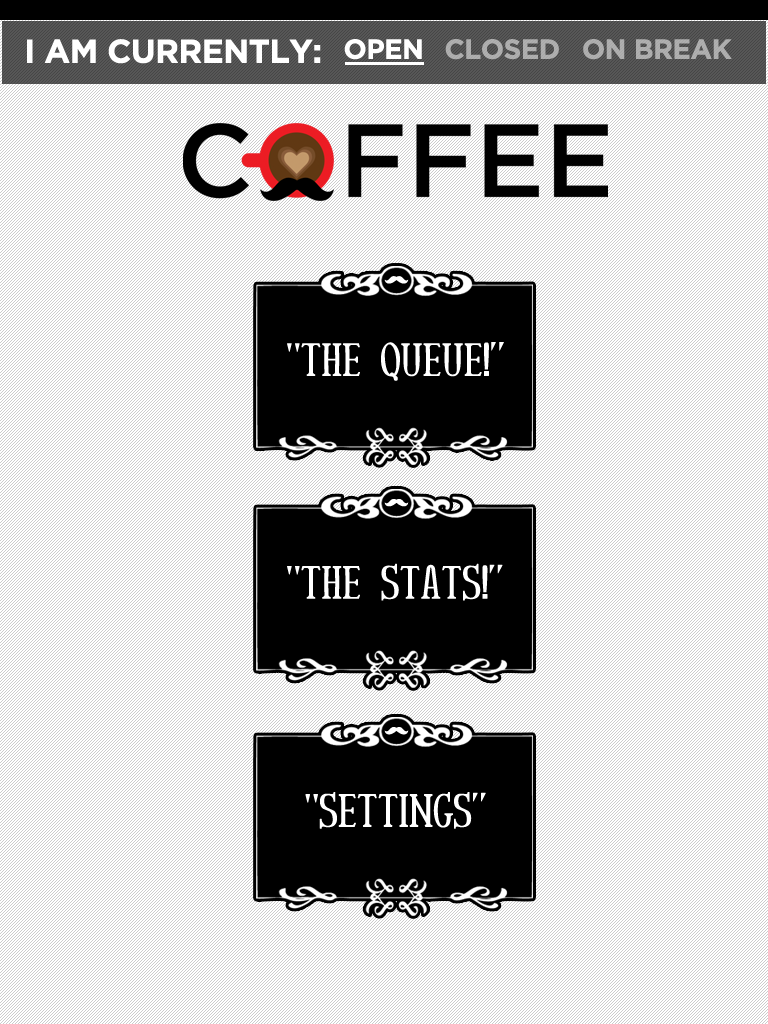
<style>
.page{position:relative;width:768px;height:1024px;background:#ffffff}
.page>*{position:absolute;margin:0}
.t1{font:32.8px "Gotham-Bold";letter-spacing:-0.04em;color:#ffffff;text-transform:uppercase;font-weight:bold}
.t2{font:27.3px "Gotham-Bold";letter-spacing:-0.04em;color:#ffffff;text-transform:uppercase;font-weight:bold}
.t3{font:27.3px "Gotham-Bold";letter-spacing:-0.04em;color:#b0b0b0;text-transform:uppercase;font-weight:bold}
.t4{font:45.8px "RutabanNormal";letter-spacing:-0.04em;color:#ffffff;text-transform:uppercase;font-weight:bold}
</style>
<div class="page">
<p class="t1" style="left:27px;top:39px;width:294px;height:25px">I AM CURRENTLY:</p>
<p class="t2" style="left:344px;top:39px;width:78px;height:21px">OPEN</p>
<p class="t3" style="left:445px;top:39px;width:114px;height:21px">CLOSED</p>
<p class="t3" style="left:583px;top:39px;width:149px;height:21px">ON BREAK</p>
<p class="t4" style="left:287px;top:342px;width:217px;height:39px">"The Queue!”</p>
<p class="t4" style="left:287px;top:563px;width:216px;height:38px">"THE STATS!”</p>
<p class="t4" style="left:305px;top:792px;width:181px;height:37px">"Settings”</p>
</div>
